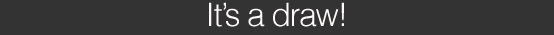
<style>
.page{position:relative;width:554px;height:35px;background:#333333}
.page>*{position:absolute;margin:0}
.t1{font:32.1px "Helvetica-Light";letter-spacing:-0.04em;color:#fffbfb}
</style>
<div class="page">
<p class="t1" style="left:209px;top:2px;width:135px;height:25px">It’s a draw!</p>
</div>
